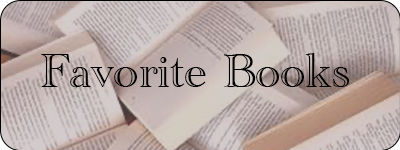
<style>
.page{position:relative;width:400px;height:150px}
.page>*{position:absolute;margin:0}
.t1{font:50px "AcademyEngravedLetPlain";color:#000000}
</style>
<div class="page">
<p class="t1" style="left:41px;top:53px;width:309px;height:35px">Favorite Books</p>
</div>
